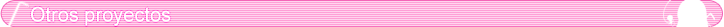
<style>
.page{position:relative;width:724px;height:27px;background:#ffd4ed}
.page>*{position:absolute;margin:0}
.t1{font:20px "ArialMT";color:#ffffff}
</style>
<div class="page">
<p class="t1" style="left:31px;top:6px;width:140px;height:20px">Otros proyectos</p>
</div>
